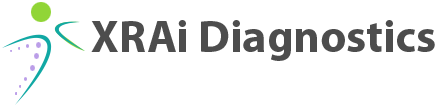
<style>
.page{position:relative;width:441px;height:109px;background:#ffffff}
.page>*{position:absolute;margin:0}
.t1{font:45.6px "MyriadPro-Bold";color:#4d4d4d}
</style>
<div class="page">
<p class="t1" style="left:91px;top:20px;width:344px;height:41px">XRAi Diagnostics</p>
</div>
